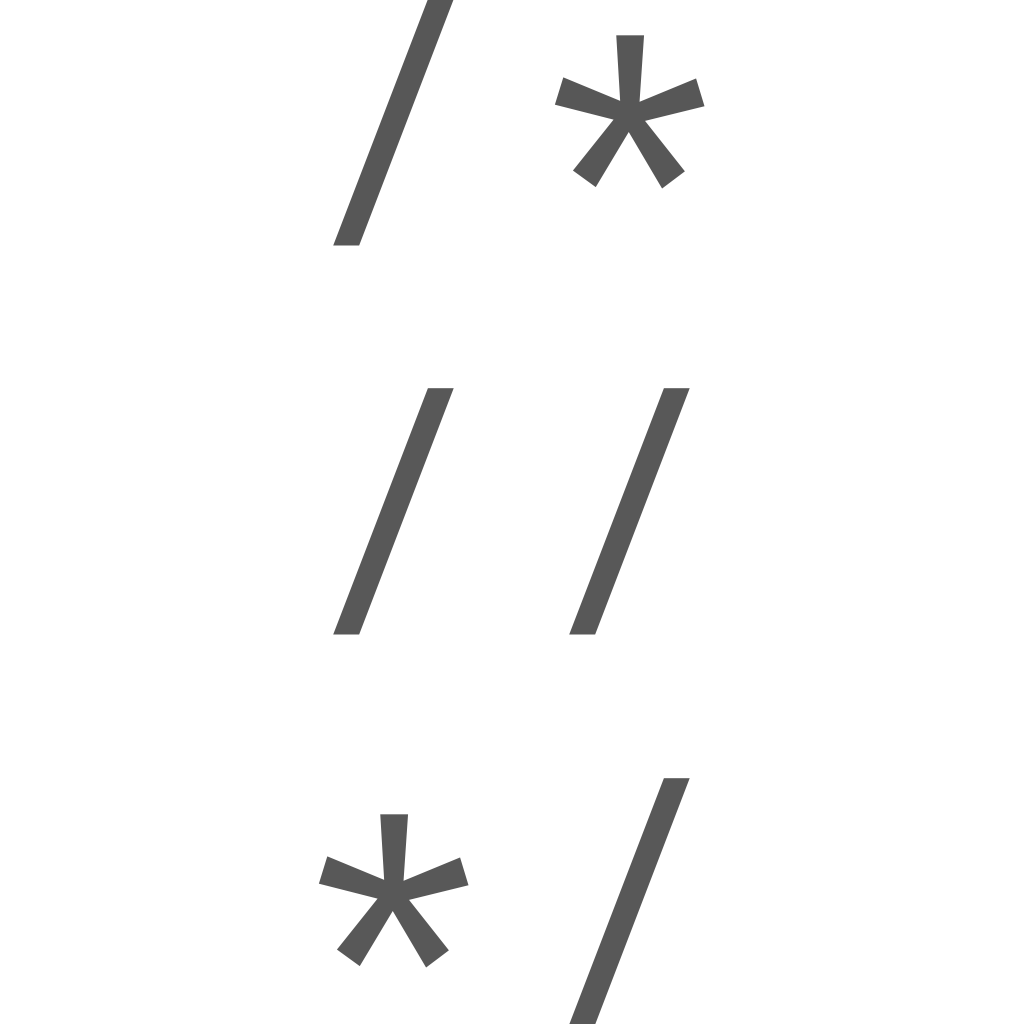
<style>
.page{position:relative;width:1024px;height:1024px;background:#ffffff}
.page>*{position:absolute;margin:0}
.t1{font:318.9px "RobotoMono-Regular";letter-spacing:0.14em;color:#575757}
.t2{font:318.9px "RobotoMono-Regular";letter-spacing:0.14em;color:#585858}
</style>
<div class="page">
<p class="t1" style="left:333px;top:0px;width:372px;height:246px">/*</p>
<p class="t2" style="left:333px;top:388px;width:357px;height:247px">//</p>
<p class="t2" style="left:318px;top:778px;width:372px;height:247px">*/</p>
</div>
